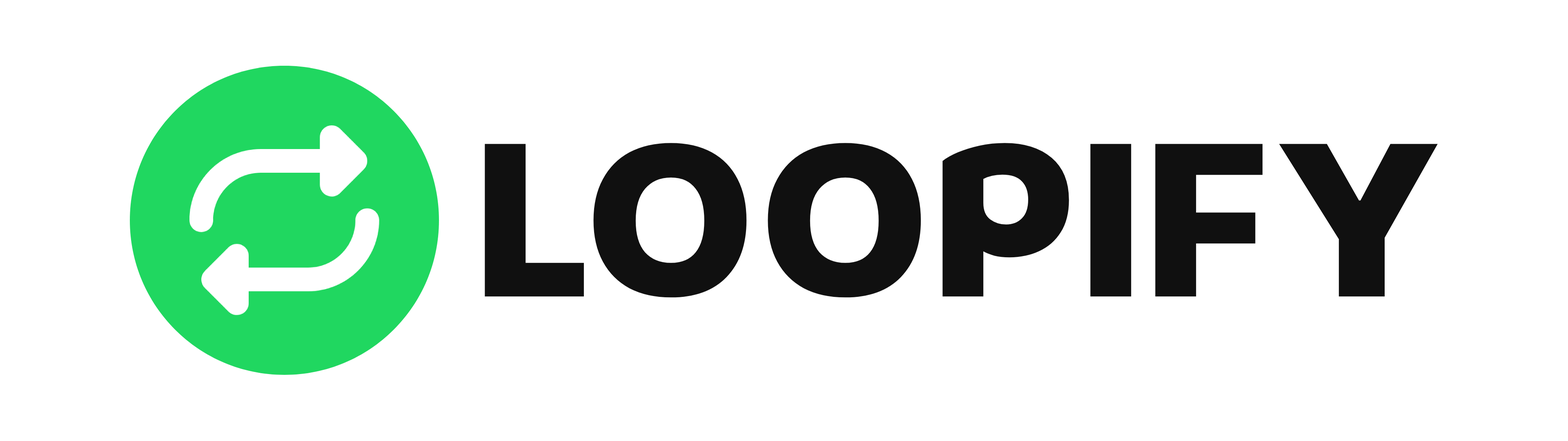
<style>
.page{position:relative;width:1568px;height:441px;background:#ffffff}
.page>*{position:absolute;margin:0}
.t1{font:239.8px "BraahOne-Regular";color:#101010}
</style>
<div class="page">
<p class="t1" style="left:485px;top:143px;width:953px;height:155px">LOOPIFY</p>
</div>
